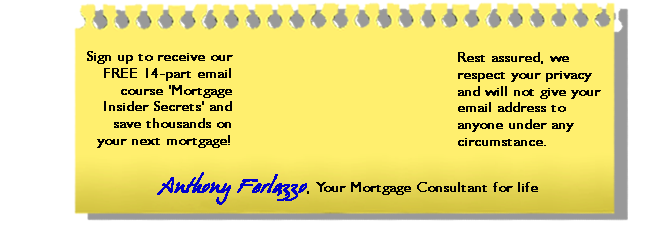
<style>
.page{position:relative;width:670px;height:240px;background:#ffef6e}
.page>*{position:absolute;margin:0}
.t1{font:14px "Humanist521BT-Roman";color:#000000;font-weight:bold}
.t2{font:18px "HansHand";color:#0000cc;font-weight:bold}
</style>
<div class="page">
<p class="t1" style="left:87px;top:51px;width:146px;height:97px;text-align:right">Sign up to receive our<br>FREE 14-part email<br>course 'Mortgage<br>Insider Secrets' and<br>save thousands on<br>your next mortgage!</p>
<p class="t1" style="left:458px;top:52px;width:143px;height:94px">Rest assured, we <br>respect your privacy <br>and will not give your <br>email address to <br>anyone under any <br>circumstance.</p>
<p class="t1" style="left:157px;top:172px;width:381px;height:33px"><span class="t2">Anthony Ferlazzo</span>, Your Mortgage Consultant for life</p>
</div>
